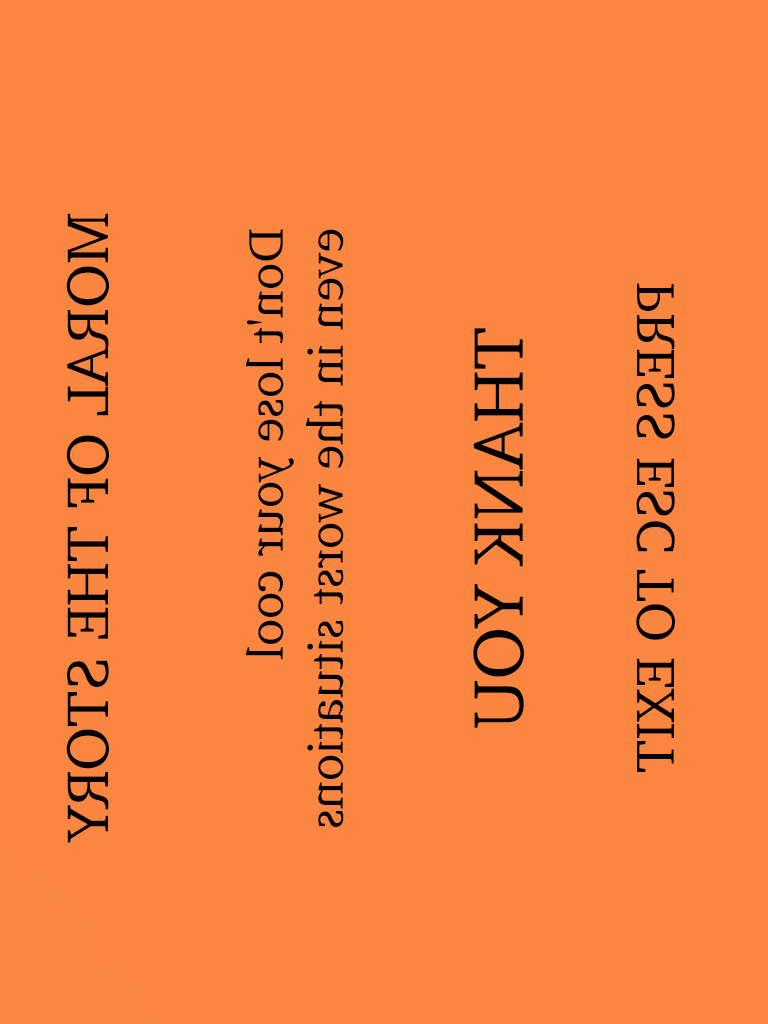
<style>
.page{position:relative;width:768px;height:1024px;background:#fa8640}
.page>*{position:absolute;margin:0}
.t1{font:60px "Charter-Roman";color:#000000}
.t2{font:50px "Charter-Roman";color:#000000}
.t3{font:55px "Charter-Roman";color:#000000}
.t4{font:72px "Charter-Roman";color:#000000}
</style>
<div class="page">
<p class="t1" style="left:66px;top:213px;width:43px;height:630px;rotate:90deg">MORAL OF THE STORY</p>
<p class="t2" style="left:246px;top:229px;width:98px;height:598px;rotate:90deg">Don't lose your cool <br>even in the worst situations</p>
<p class="t3" style="left:636px;top:283px;width:39px;height:489px;rotate:90deg">PRESS ESC TO EXIT</p>
<p class="t4" style="left:473px;top:328px;width:51px;height:400px;rotate:90deg">THANK YOU</p>
</div>
